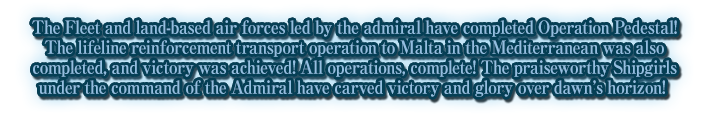
<style>
.page{position:relative;width:703px;height:115px;background:#053f55}
.page>*{position:absolute;margin:0}
.t1{font:18px/20px "RyuminPro-ExBold";letter-spacing:-0.04em;color:#93bee0;scale:0.9 1}
</style>
<div class="page">
<p class="t1" style="left:32px;top:20px;width:645px;height:77px;text-align:center">The Fleet and land-based air forces led by the admiral have completed Operation Pedestal!<br>The lifeline reinforcement transport operation to Malta in the Mediterranean was also<br>completed, and victory was achieved! All operations, complete! The praiseworthy Shipgirls<br>under the command of the Admiral have carved victory and glory over dawn’s horizon!</p>
</div>
